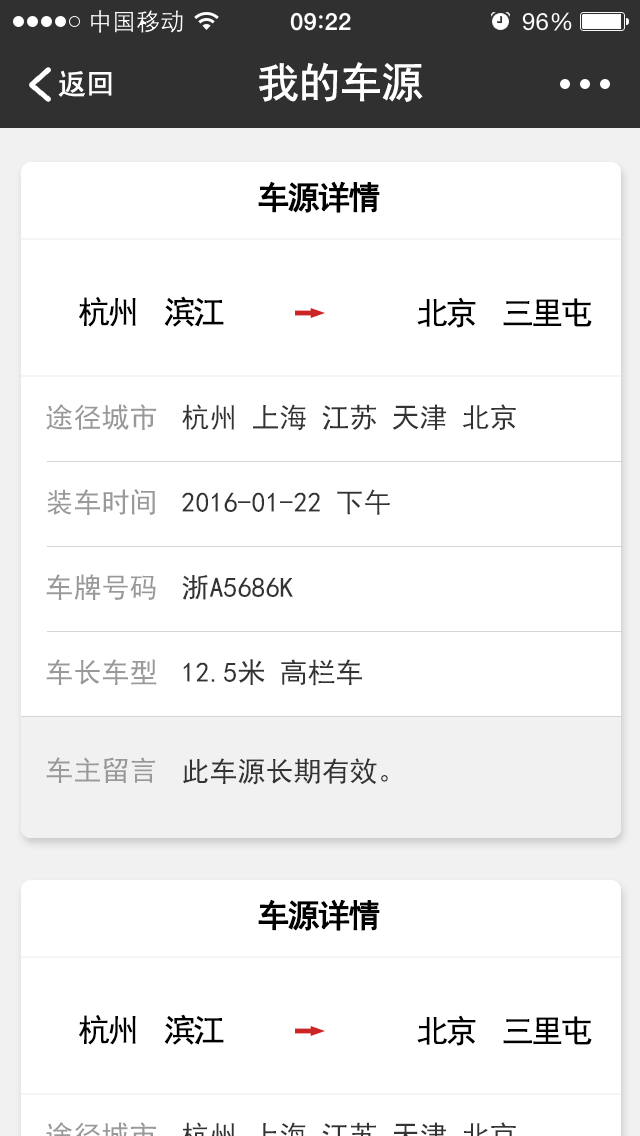
<style>
.page{position:relative;width:640px;height:1136px;background:#ffffff}
.page>*{position:absolute;margin:0}
.t1{font:42px "SimHei";letter-spacing:-0.04em;color:#ffffff;font-weight:bold}
.t2{font:28px "SimHei";color:#ffffff;font-weight:bold}
.t3{font:32px "SimHei";letter-spacing:-0.08em;color:#010101;font-weight:bold}
.t4{font:32px "SimHei";letter-spacing:-0.08em;color:#000000}
.t5{font:28px "SimHei";color:#999999}
.t6{font:28px "SimHei";color:#333333}
</style>
<div class="page">
<p class="t1" style="left:259px;top:62px;width:164px;height:40px">我的车源</p>
<p class="t2" style="left:58px;top:70px;width:54px;height:27px">返回</p>
<p class="t3" style="left:258px;top:181px;width:122px;height:32px">车源详情</p>
<p class="t4" style="left:79px;top:296px;width:145px;height:31px">杭州  滨江</p>
<p class="t4" style="left:417px;top:297px;width:175px;height:31px">北京  三里屯</p>
<p class="t5" style="left:46px;top:404px;width:110px;height:26px">途径城市</p>
<p class="t6" style="left:182px;top:404px;width:334px;height:27px">杭州 上海 江苏 天津 北京</p>
<p class="t5" style="left:47px;top:489px;width:108px;height:26px">装车时间</p>
<p class="t6" style="left:182px;top:489px;width:208px;height:26px">2016-01-22 下午</p>
<p class="t5" style="left:46px;top:574px;width:110px;height:26px">车牌号码</p>
<p class="t6" style="left:182px;top:574px;width:111px;height:26px">浙A5686K</p>
<p class="t5" style="left:46px;top:659px;width:111px;height:26px">车长车型</p>
<p class="t6" style="left:183px;top:659px;width:179px;height:27px">12.5米 高栏车</p>
<p class="t5" style="left:46px;top:757px;width:109px;height:26px">车主留言</p>
<p class="t6" style="left:183px;top:758px;width:205px;height:27px">此车源长期有效。</p>
<p class="t3" style="left:258px;top:899px;width:122px;height:32px">车源详情</p>
<p class="t4" style="left:79px;top:1014px;width:145px;height:31px">杭州  滨江</p>
<p class="t4" style="left:417px;top:1015px;width:175px;height:31px">北京  三里屯</p>
</div>
